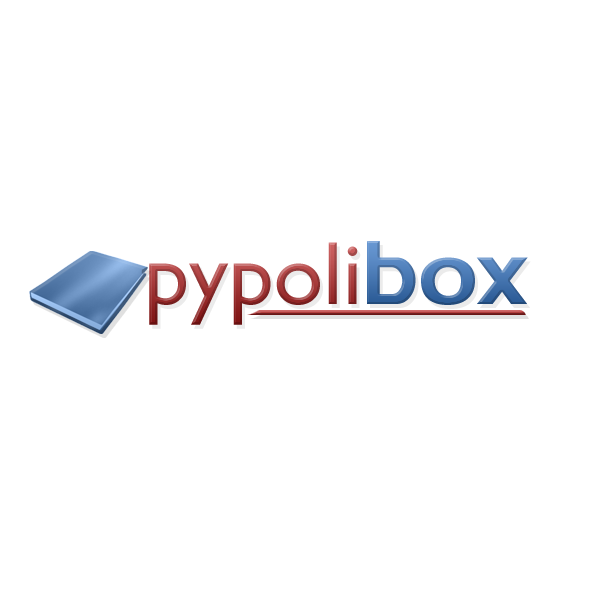
<style>
.page{position:relative;width:600px;height:600px;background:#ffffff}
.page>*{position:absolute;margin:0}
.t1{font:90px "GillSansMT"}
.t2{font:90px "Denmark"}
</style>
<div class="page">
<p class="t1" style="left:149px;top:241px;width:379px;height:84px">pypoli<span class="t2">box</span></p>
</div>
